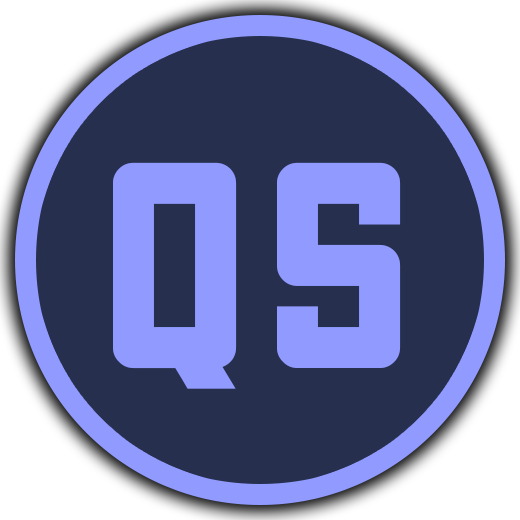
<style>
.page{position:relative;width:520px;height:520px;background:#262f4e}
.page>*{position:absolute;margin:0}
.t1{font:284.6px "Cornerstone";color:#919bff;text-transform:uppercase}
</style>
<div class="page">
<p class="t1" style="left:113px;top:162px;width:288px;height:227px">QS</p>
</div>
